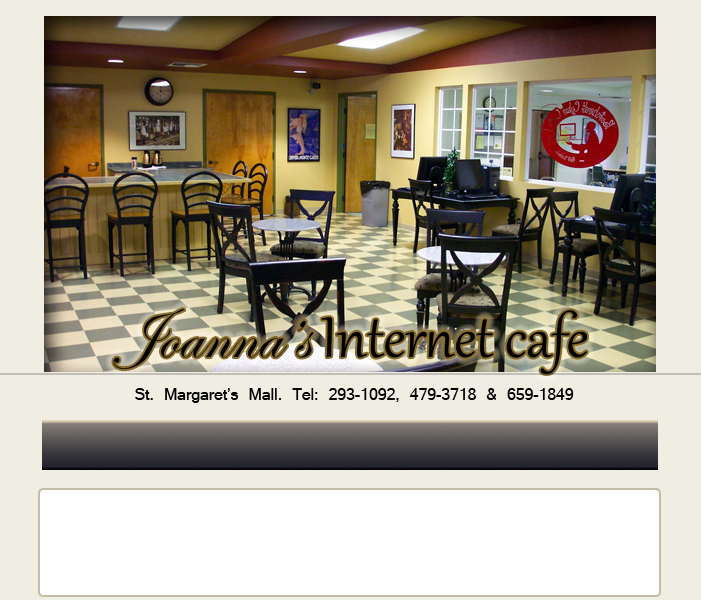
<style>
.page{position:relative;width:701px;height:600px;background:#f0ede3}
.page>*{position:absolute;margin:0}
.t1{font:70px "Gabriola";color:#000000}
.t2{font:70px "EdwardianScriptITC";color:#000000}
.t3{font:17.5px "Latha";color:#000000}
</style>
<div class="page">
<p class="t1" style="left:113px;top:309px;width:474px;height:65px"><span class="t2">Joanna’s </span>Internet cafe</p>
<p class="t3" style="left:135px;top:388px;width:439px;height:15px">St. Margaret’s Mall. Tel: 293-1092, 479-3718 &amp; 659-1849</p>
</div>
